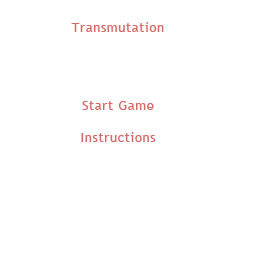
<style>
.page{position:relative;width:256px;height:256px;background:#ffffff}
.page>*{position:absolute;margin:0}
.t1{font:13px "TrebuchetMS";letter-spacing:0.05em;color:#d86a65}
</style>
<div class="page">
<p class="t1" style="left:71px;top:22px;width:93px;height:10px">Transmutation</p>
<p class="t1" style="left:82px;top:101px;width:72px;height:9px">Start Game</p>
<p class="t1" style="left:81px;top:132px;width:75px;height:10px">Instructions</p>
</div>
